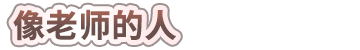
<style>
.page{position:relative;width:360px;height:50px;background:#ffffff}
.page>*{position:absolute;margin:0}
.t1{font:32px "SourceHanSansSC-Bold";color:#73534d;font-weight:bold}
</style>
<div class="page">
<p class="t1" style="left:13px;top:9px;width:163px;height:32px">像老师的人</p>
</div>
